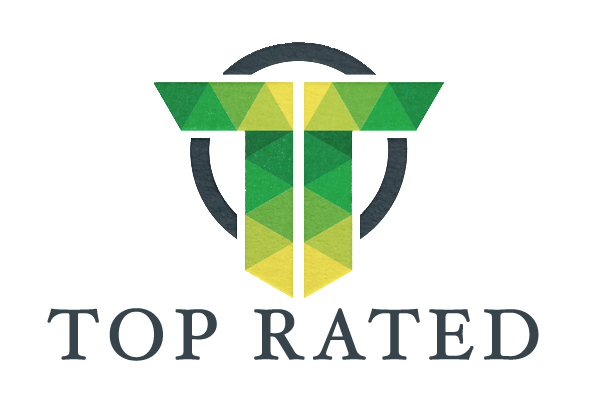
<style>
.page{position:relative;width:594px;height:420px;background:#ffffff}
.page>*{position:absolute;margin:0}
.t1{font:70.5px "HoeflerText-Regular";letter-spacing:0.1em;color:#38444b;font-weight:bold}
</style>
<div class="page">
<p class="t1" style="left:47px;top:308px;width:492px;height:53px">TOP RATED</p>
</div>
